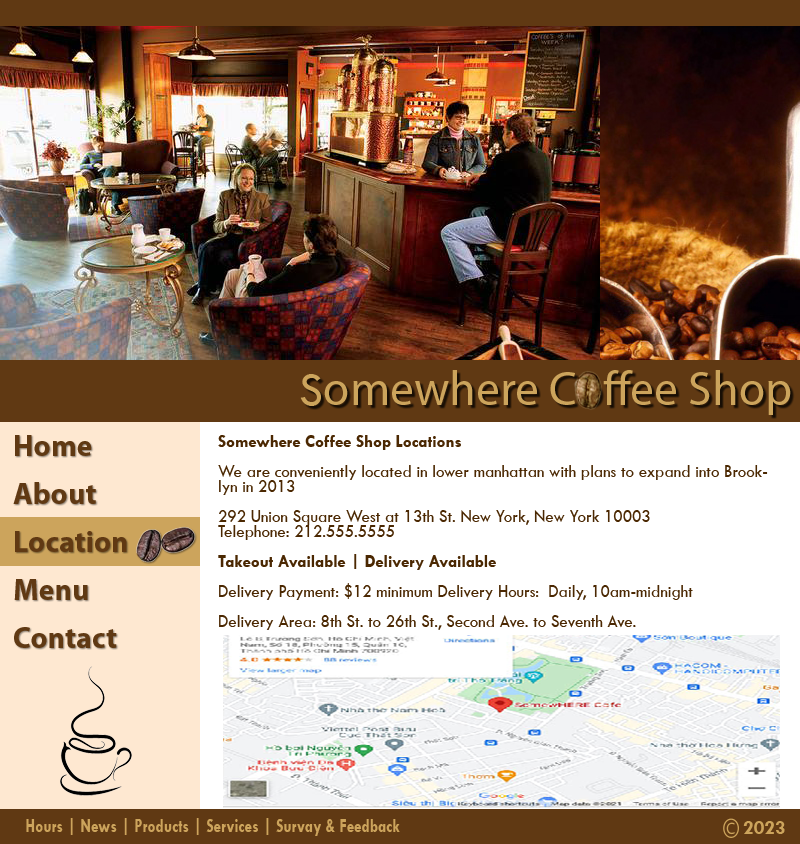
<style>
.page{position:relative;width:800px;height:844px}
.page>*{position:absolute;margin:0}
.t1{font:48px "MyriadPro-Regular";color:#cca45c}
.t2{font:48px "TwCenMT-Regular";color:#cca45c}
.t3{font:30px/48px "MyriadPro-Bold";color:#603913}
.t4{font:18px/15px "TwCenMT-Regular";color:#4b2802;scale:0.94 1}
.t5{font:18px/15px "TwCenMT-Bold";color:#4b2802;scale:0.94 1}
.t6{font:20px "TwCenMT-Bold";color:#cca45c;scale:0.77 1}
.t7{font:20px "TwCenMT-Bold";color:#cca45c}
</style>
<div class="page">
<p class="t1" style="left:300px;top:370px;width:491px;height:45px"><span class="t2">S</span>omewhere Coffee Shop</p>
<p class="t3" style="left:13px;top:435px;width:114px;height:213px">Home<br>About<br>Location<br>Menu<br>Contact</p>
<p class="t4" style="left:218px;top:435px;width:550px;height:195px"><span class="t5">Somewhere Coffee Shop Locations<br></span><br>We are conveniently located in lower manhattan with plans to expand into Brooklyn in 2013<br><br>292 Union Square West at 13th St. New York, New York 10003 <br>Telephone: 212.555.5555<br><span class="t5"><br>Takeout Available | Delivery Available<br><br></span>Delivery Payment: $12 minimum Delivery Hours:  Daily, 10am-midnight<br><br>Delivery Area: 8th St. to 26th St., Second Ave. to Seventh Ave.</p>
<p class="t6" style="left:26px;top:818px;width:374px;height:18px">Hours | News | Products | Services | Survay &amp; Feedback</p>
<p class="t7" style="left:743px;top:821px;width:42px;height:13px">2023</p>
</div>
